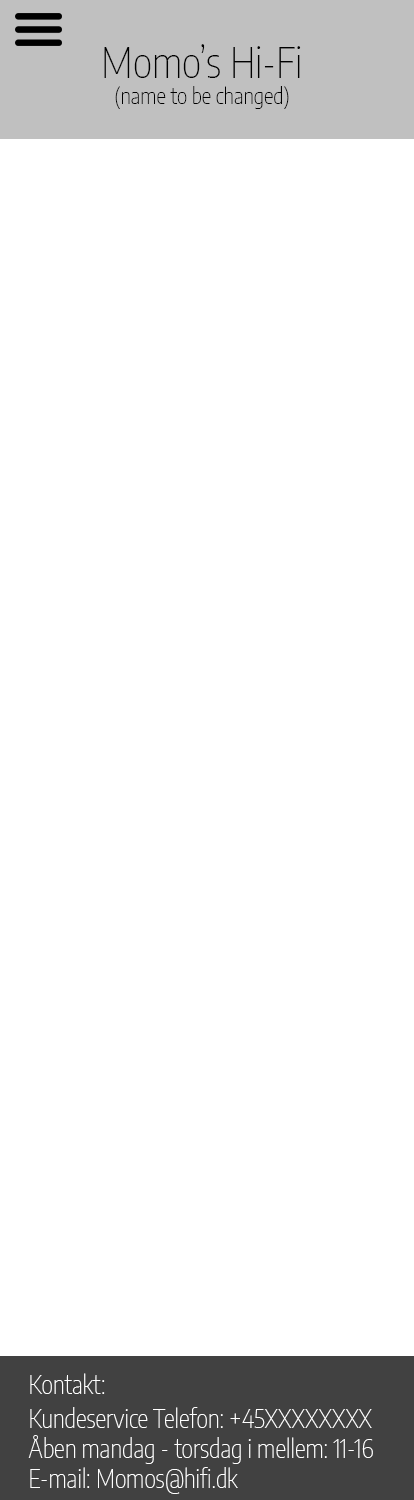
<style>
.page{position:relative;width:414px;height:1500px;background:#ffffff}
.page>*{position:absolute;margin:0}
.t1{font:22.2px "EncodeSansCondensed-Thin";color:#000000}
.t2{font:41.7px "EncodeSansCondensed-Thin";color:#000000}
.t3{font:25px "EncodeSansCondensed-Thin";color:#ffffff}
</style>
<div class="page">
<p class="t1" style="left:104px;top:44px;width:197px;height:65px;text-align:center"><span class="t2">Momo’s Hi-Fi<br></span>(name to be changed)</p>
<p class="t3" style="left:30px;top:1373px;width:75px;height:21px">Kontakt:</p>
<p class="t3" style="left:28px;top:1407px;width:345px;height:87px">Kundeservice Telefon: +45XXXXXXXX<br>Åben mandag - torsdag i mellem: 11-16<br>E-mail: Momos@hifi.dk</p>
</div>
